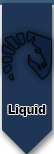
<style>
.page{position:relative;width:54px;height:154px;background:#1e3556}
.page>*{position:absolute;margin:0}
.t1{font:11.7px "Arial-Black";letter-spacing:-0.01em;color:#000000}
</style>
<div class="page">
<p class="t1" style="left:8px;top:105px;width:38px;height:11px">Liquid</p>
</div>
